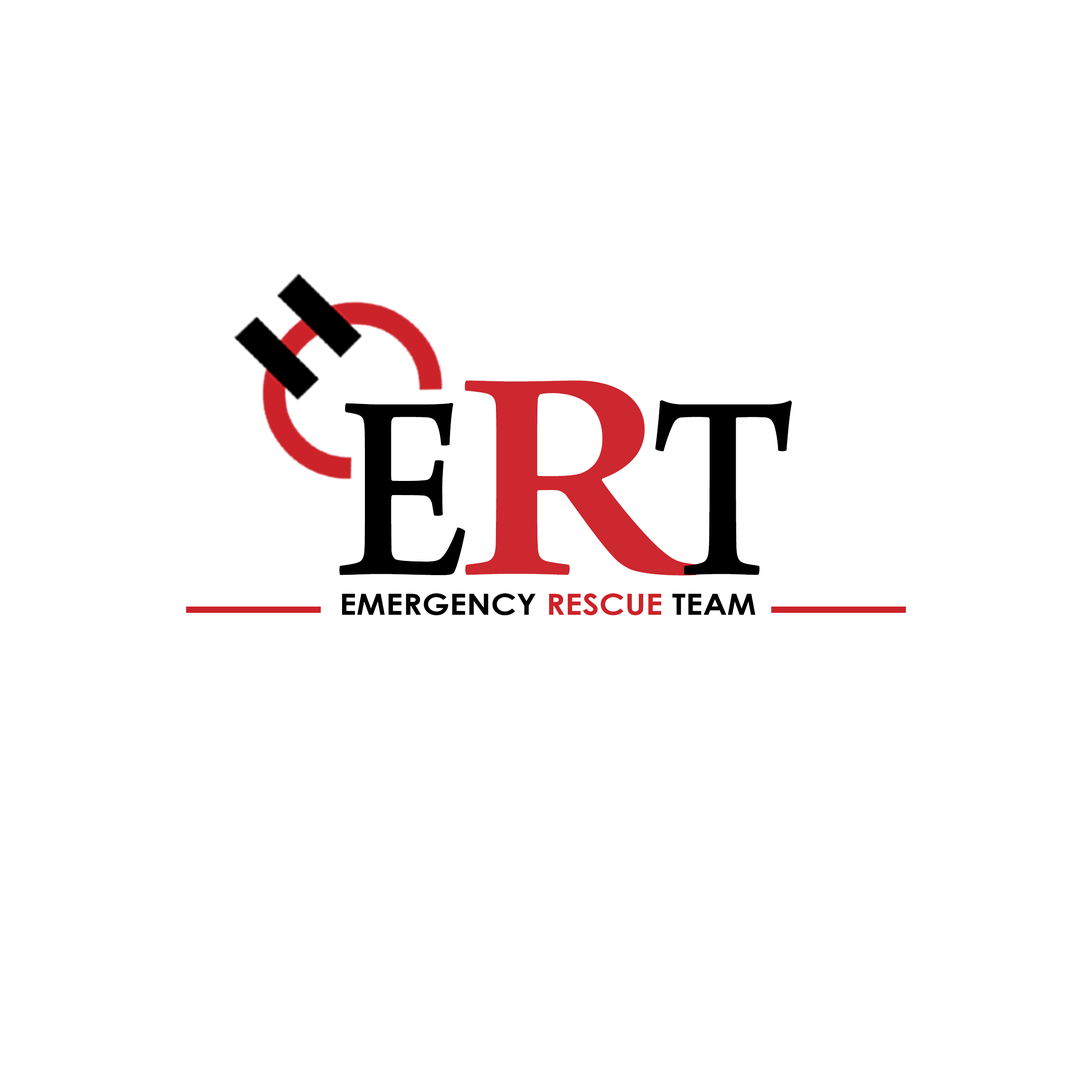
<style>
.page{position:relative;width:1092px;height:1092px;background:#ffffff}
.page>*{position:absolute;margin:0}
.t1{font:420.7px "AdobeNaskh-Medium";color:#cd272f;text-transform:uppercase;font-weight:bold;scale:1.15 1}
.t2{font:370.7px "AdobeNaskh-Medium";color:#000000;text-transform:uppercase;font-weight:bold;scale:0.83 1}
.t3{font:29.3px "CenturyGothic-Bold";color:#000000;scale:1.12 1}
.t4{font:29.3px "CenturyGothic-Bold";color:#cc2229;scale:1.12 1}
</style>
<div class="page">
<p class="t1" style="left:465px;top:380px;width:234px;height:196px">R</p>
<p class="t2" style="left:655px;top:400px;width:137px;height:175px">T</p>
<p class="t2" style="left:339px;top:403px;width:126px;height:172px">E</p>
<p class="t3" style="left:342px;top:593px;width:413px;height:23px">EMERGENCY <span class="t4">RESCUE </span>TEAM</p>
</div>
